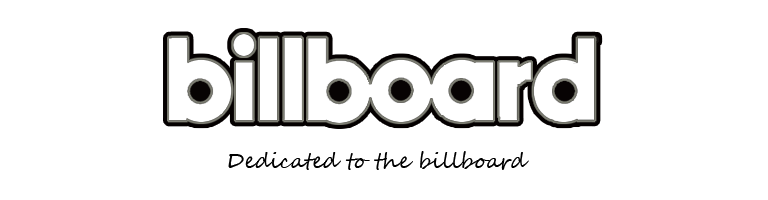
<style>
.page{position:relative;width:768px;height:200px;background:#ffffff}
.page>*{position:absolute;margin:0}
.t1{font:20.8px "SegoeScript";color:#000000}
</style>
<div class="page">
<p class="t1" style="left:228px;top:151px;width:301px;height:19px">Dedicated to the billboard</p>
</div>
